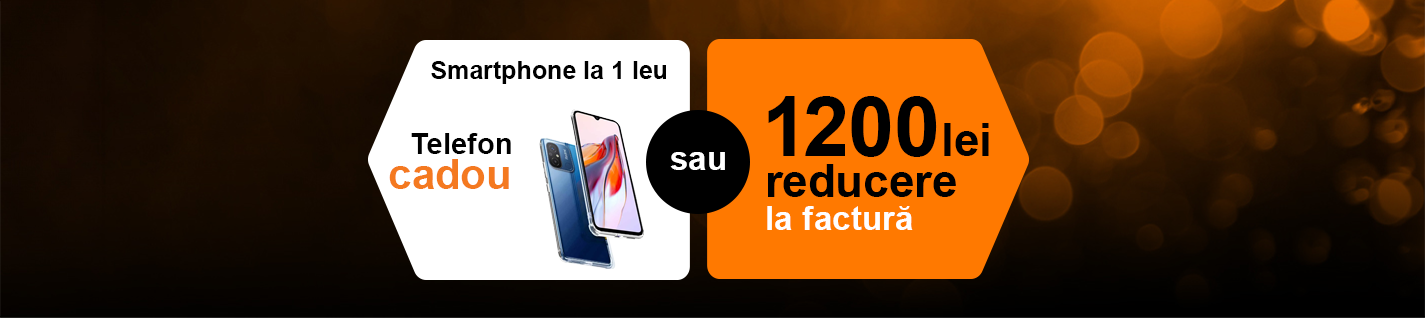
<style>
.page{position:relative;width:1425px;height:318px}
.page>*{position:absolute;margin:0}
.t1{font:25px "Arial-BoldMT";color:#000000}
.t2{font:83.3px "Arial-BoldMT";letter-spacing:0.005em;color:#000000}
.t3{font:45.8px "Arial-BoldMT";letter-spacing:0.005em;color:#000000}
.t4{font:29.2px "Arial-BoldMT";color:#000000}
.t5{font:41.7px "Arial-BoldMT";color:#f47920}
.t6{font:33.3px "Arial-BoldMT";color:#ffffff}
.t7{font:33.3px "Arial-BoldMT";letter-spacing:0.005em;color:#ffffff}
</style>
<div class="page">
<p class="t1" style="left:431px;top:61px;width:235px;height:23px">Smartphone la 1 leu</p>
<p class="t2" style="left:768px;top:96px;width:221px;height:61px">1200<span class="t3">lei</span></p>
<p class="t4" style="left:411px;top:133px;width:100px;height:21px">Telefon</p>
<p class="t5" style="left:389px;top:159px;width:120px;height:30px">cadou</p>
<p class="t6" style="left:670px;top:152px;width:55px;height:18px">sau</p>
<p class="t3" style="left:768px;top:164px;width:188px;height:33px">reducere</p>
<p class="t7" style="left:767px;top:206px;width:146px;height:24px">la factură</p>
</div>
